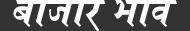
<style>
.page{position:relative;width:190px;height:31px;background:#333333}
.page>*{position:absolute;margin:0}
.t1{font:48px "Kruti-Dev696";color:#ffffff;font-weight:bold}
</style>
<div class="page">
<p class="t1" style="left:13px;top:0px;width:164px;height:32px">cktkj Hkko</p>
</div>
